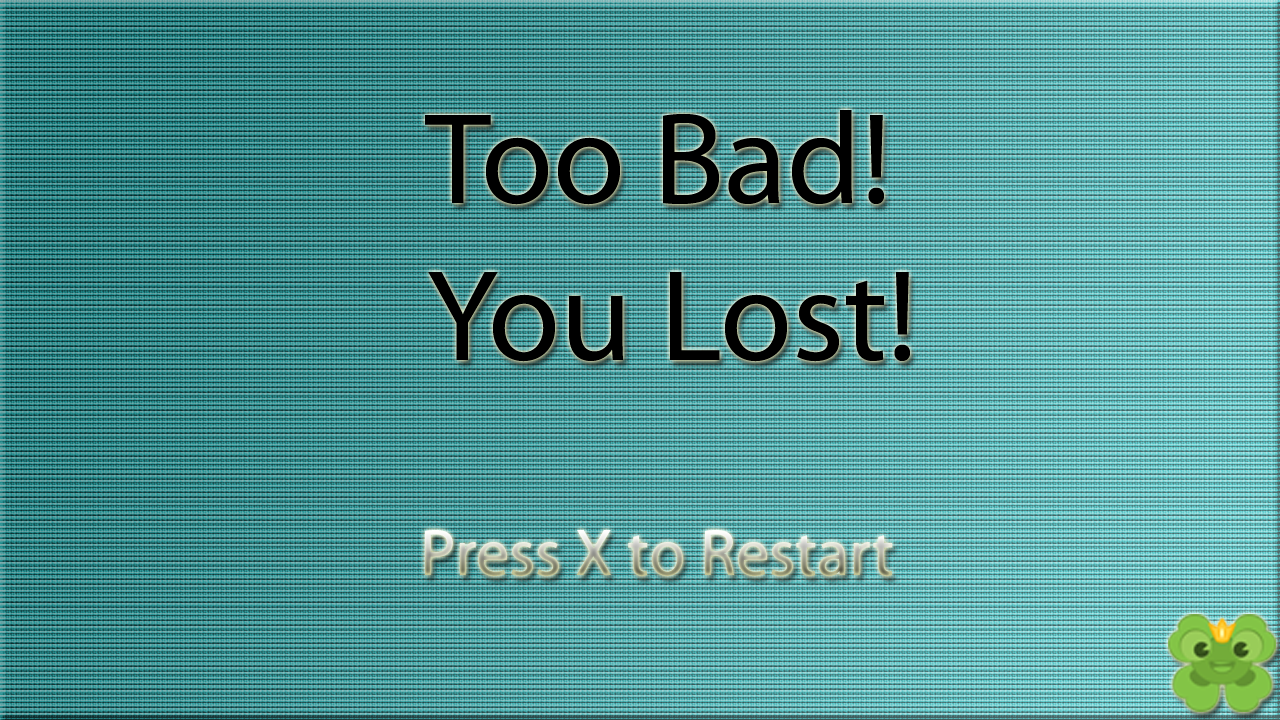
<style>
.page{position:relative;width:1280px;height:720px}
.page>*{position:absolute;margin:0}
.t1{font:131.2px "MyriadPro-Regular";color:#000000}
.t2{font:66.4px "MyriadPro-Regular"}
</style>
<div class="page">
<p class="t1" style="left:425px;top:110px;width:485px;height:252px;text-align:center">Too Bad! <br>You Lost!</p>
<p class="t2" style="left:425px;top:530px;width:468px;height:46px">Press X to Restart</p>
</div>
